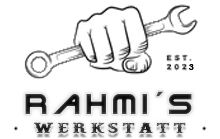
<style>
.page{position:relative;width:220px;height:139px;background:#ffffff}
.page>*{position:absolute;margin:0}
.t1{font:9px "CenturyGothic-Bold";letter-spacing:0.17em;color:#000000}
.t2{font:30.4px "TerminatorTwo";letter-spacing:0.17em;color:#212121}
.t3{font:16.2px "Docktrin";letter-spacing:0.17em;color:#393939;scale:1.44 1}
</style>
<div class="page">
<p class="t1" style="left:188px;top:64px;width:6px;height:6px">3</p>
<p class="t2" style="left:25px;top:91px;width:167px;height:23px">Rahmi´s</p>
<p class="t3" style="left:34px;top:122px;width:152px;height:12px">Werkstatt</p>
</div>
